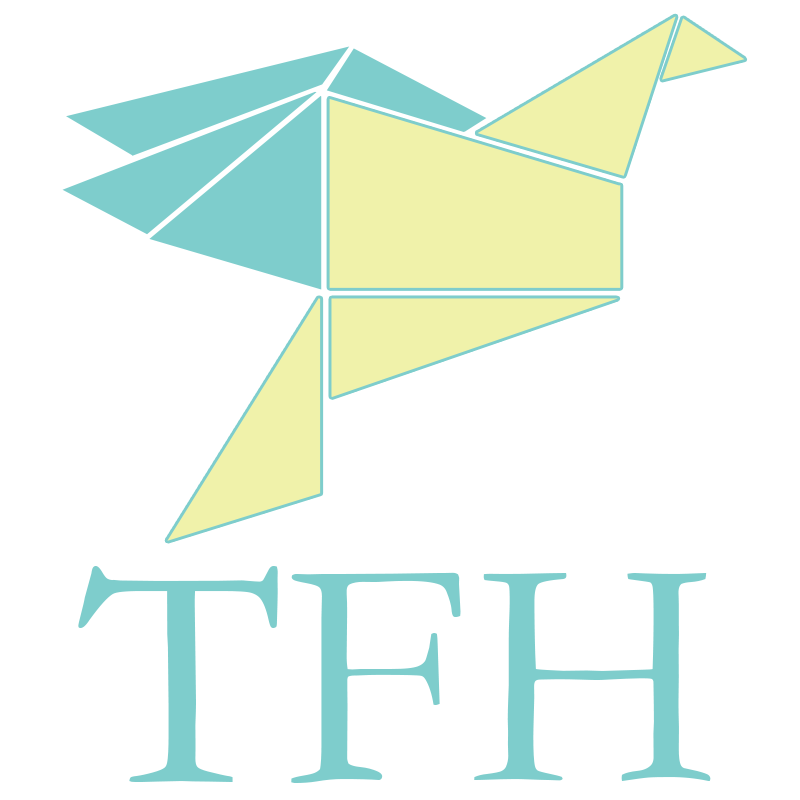
<style>
.page{position:relative;width:800px;height:800px;background:#ffffff}
.page>*{position:absolute;margin:0}
.t1{font:330px "Garamond";color:#7ecdcc}
</style>
<div class="page">
<p class="t1" style="left:78px;top:566px;width:633px;height:217px">TFH</p>
</div>
